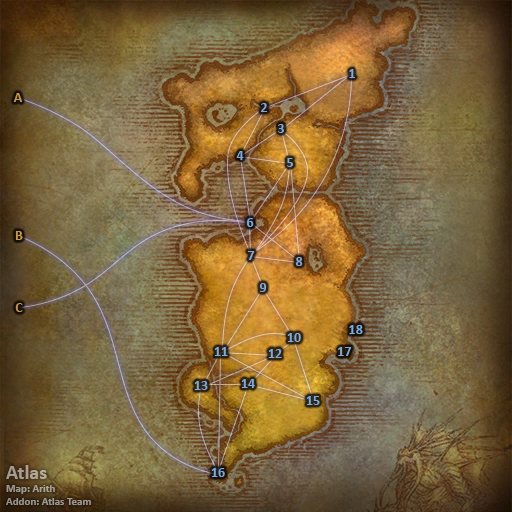
<style>
.page{position:relative;width:512px;height:512px}
.page>*{position:absolute;margin:0}
.t1{font:14px "Calibri-Bold";color:#7babe0}
.t2{font:14px "Calibri-Bold";color:#cc9933}
.t3{font:11px "Calibri-Bold";color:#a59b92}
.t4{font:20px "Calibri-Bold";color:#a59b92}
</style>
<div class="page">
<p class="t1" style="left:349px;top:69px;width:6px;height:9px">1</p>
<p class="t2" style="left:13px;top:93px;width:9px;height:9px">A</p>
<p class="t1" style="left:261px;top:103px;width:7px;height:9px">2</p>
<p class="t1" style="left:278px;top:124px;width:6px;height:9px">3</p>
<p class="t1" style="left:236px;top:151px;width:8px;height:9px">4</p>
<p class="t1" style="left:287px;top:158px;width:6px;height:9px">5</p>
<p class="t1" style="left:247px;top:218px;width:7px;height:9px">6</p>
<p class="t2" style="left:15px;top:231px;width:8px;height:9px">B</p>
<p class="t1" style="left:247px;top:251px;width:8px;height:9px">7</p>
<p class="t1" style="left:295px;top:257px;width:8px;height:9px">8</p>
<p class="t1" style="left:259px;top:283px;width:8px;height:9px">9</p>
<p class="t2" style="left:15px;top:303px;width:8px;height:9px">C</p>
<p class="t1" style="left:349px;top:325px;width:14px;height:9px">18</p>
<p class="t1" style="left:287px;top:333px;width:14px;height:9px">10</p>
<p class="t1" style="left:214px;top:347px;width:14px;height:9px">11</p>
<p class="t1" style="left:268px;top:349px;width:14px;height:9px">12</p>
<p class="t1" style="left:338px;top:347px;width:14px;height:9px">17</p>
<p class="t1" style="left:194px;top:381px;width:14px;height:9px">13</p>
<p class="t1" style="left:241px;top:379px;width:14px;height:9px">14</p>
<p class="t1" style="left:306px;top:396px;width:14px;height:9px">15</p>
<p class="t3" style="left:6px;top:465px;width:85px;height:40px"><span class="t4">Atlas<br></span>Map: Arith<br>Addon: Atlas Team</p>
<p class="t1" style="left:211px;top:468px;width:14px;height:9px">16</p>
</div>
